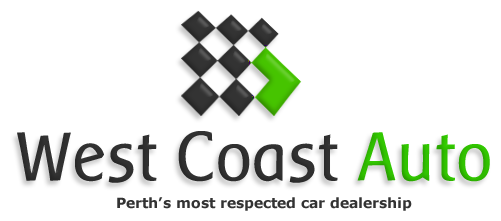
<style>
.page{position:relative;width:501px;height:221px;background:#ffffff}
.page>*{position:absolute;margin:0}
.t1{font:71.5px "BaarSophia";color:#333333}
.t2{font:71.5px "BaarSophia";color:#33cc00}
.t3{font:14px "Verdana-Bold";color:#333333}
</style>
<div class="page">
<p class="t1" style="left:17px;top:131px;width:473px;height:52px">West Coast <span class="t2">Auto</span></p>
<p class="t3" style="left:117px;top:197px;width:295px;height:14px">Perth’s most respected car dealership</p>
</div>
